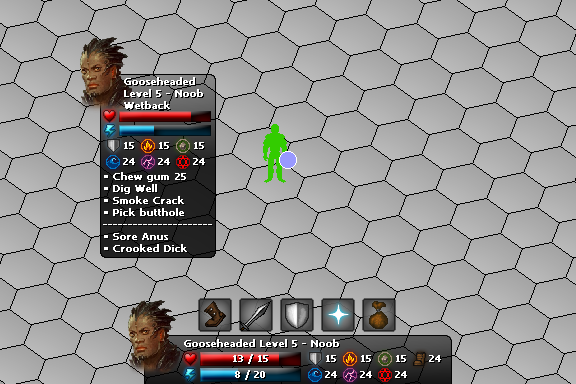
<style>
.page{position:relative;width:576px;height:384px}
.page>*{position:absolute;margin:0}
.t1{font:10px "Tahoma";color:#ffffff;font-weight:bold}
</style>
<div class="page">
<p class="t1" style="left:124px;top:77px;width:79px;height:32px">Gooseheaded<br>Level 5 - Noob<br>Wetback</p>
<p class="t1" style="left:124px;top:142px;width:10px;height:7px">15</p>
<p class="t1" style="left:159px;top:142px;width:10px;height:7px">15</p>
<p class="t1" style="left:194px;top:142px;width:10px;height:7px">15</p>
<p class="t1" style="left:123px;top:158px;width:12px;height:7px">24</p>
<p class="t1" style="left:158px;top:158px;width:12px;height:7px">24</p>
<p class="t1" style="left:193px;top:158px;width:12px;height:7px">24</p>
<p class="t1" style="left:103px;top:172px;width:109px;height:80px">• Chew gum 25<br>• Dig Well<br>• Smoke Crack<br>• Pick butthole<br>----------------------<br>• Sore Anus<br>• Crooked Dick</p>
<p class="t1" style="left:184px;top:339px;width:155px;height:8px">Gooseheaded Level 5 - Noob</p>
<p class="t1" style="left:233px;top:354px;width:35px;height:10px">13 / 15</p>
<p class="t1" style="left:326px;top:355px;width:10px;height:7px">15</p>
<p class="t1" style="left:361px;top:355px;width:10px;height:7px">15</p>
<p class="t1" style="left:396px;top:355px;width:10px;height:7px">15</p>
<p class="t1" style="left:429px;top:355px;width:12px;height:7px">24</p>
<p class="t1" style="left:235px;top:370px;width:30px;height:10px">8 / 20</p>
<p class="t1" style="left:325px;top:371px;width:12px;height:7px">24</p>
<p class="t1" style="left:360px;top:371px;width:12px;height:7px">24</p>
<p class="t1" style="left:395px;top:371px;width:12px;height:7px">24</p>
</div>
